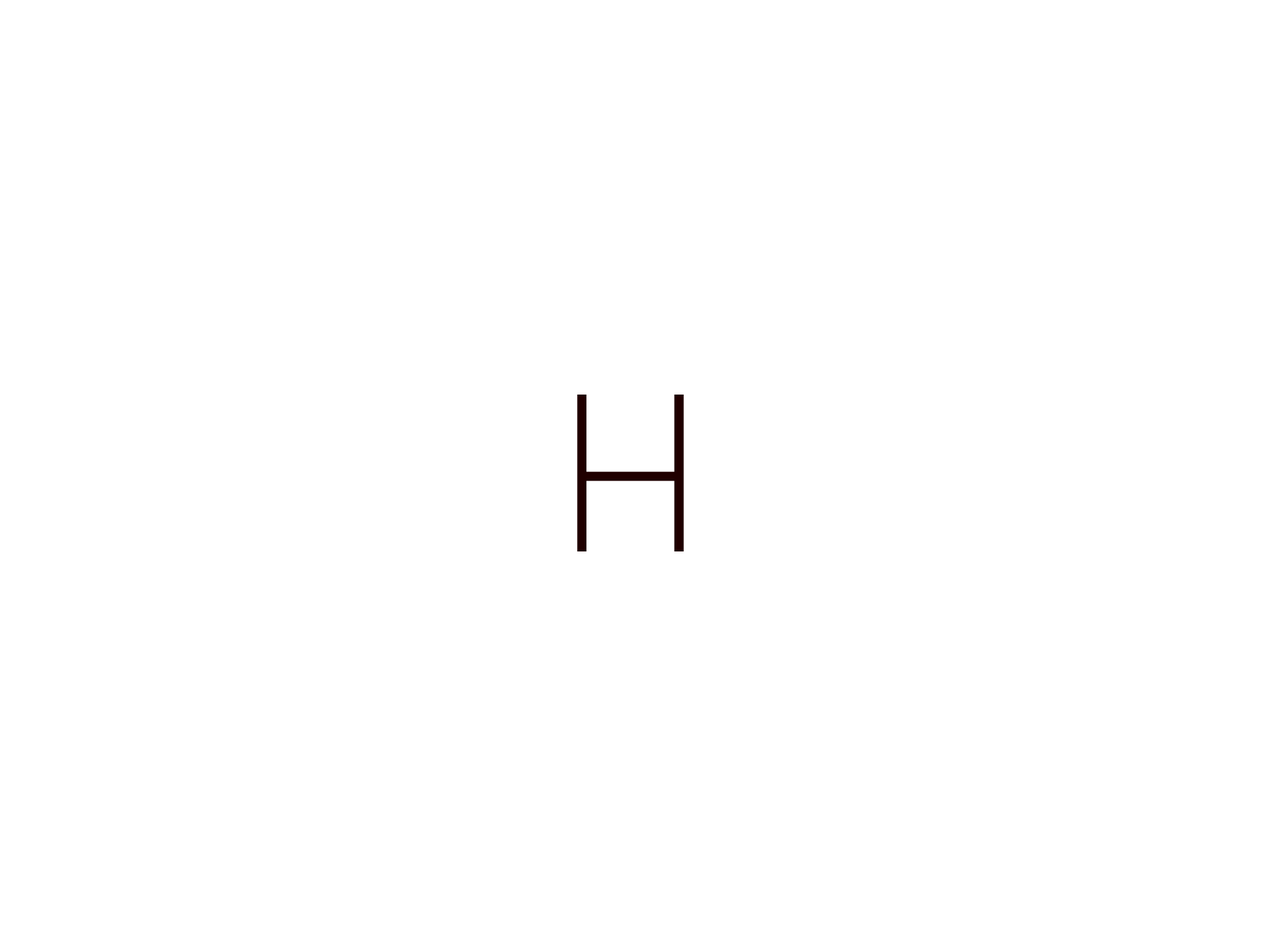
<style>
.page{position:relative;width:1261px;height:946px;background:#ffffff}
.page>*{position:absolute;margin:0}
.t1{font:222.4px "Alcubierre";color:#200000}
</style>
<div class="page">
<p class="t1" style="left:577px;top:394px;width:107px;height:157px">H</p>
</div>
